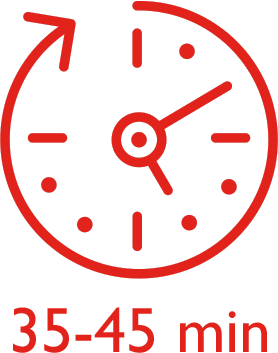
<style>
.page{position:relative;width:278px;height:353px;background:#ffffff}
.page>*{position:absolute;margin:0}
.t1{font:64px "GillSansMT";color:#e2231b}
</style>
<div class="page">
<p class="t1" style="left:13px;top:307px;width:254px;height:46px">35-45 min</p>
</div>
